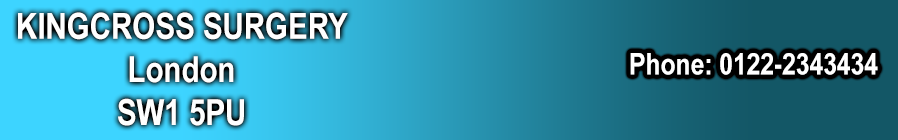
<style>
.page{position:relative;width:898px;height:140px}
.page>*{position:absolute;margin:0}
.t1{font:36px "ArialNarrow-Bold";color:#fefefe}
.t2{font:30px "ArialNarrow-Bold";color:#000000}
.t3{font:30px "ArialNarrow-Bold";color:#ffffff}
</style>
<div class="page">
<p class="t1" style="left:18px;top:12px;width:330px;height:114px;text-align:center"><span class="t2"><br></span>KINGCROSS SURGERY<br>London<br>SW1 5PU</p>
<p class="t3" style="left:630px;top:53px;width:248px;height:22px">Phone: 0122-2343434</p>
</div>
